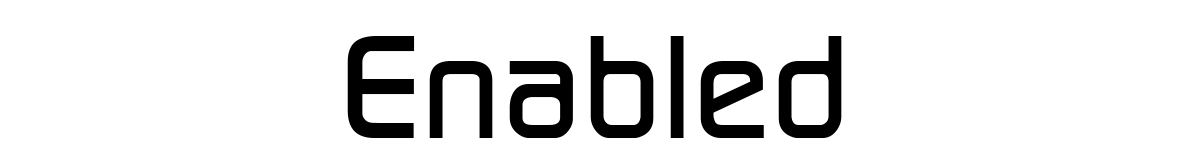
<style>
.page{position:relative;width:1203px;height:163px;background:#ffffff}
.page>*{position:absolute;margin:0}
.t1{font:144px "ContinuumMedium";color:#000000}
</style>
<div class="page">
<p class="t1" style="left:347px;top:36px;width:495px;height:102px">Enabled</p>
</div>
